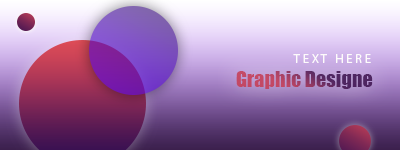
<style>
.page{position:relative;width:400px;height:150px}
.page>*{position:absolute;margin:0}
.t1{font:12.7px "MyriadPro-Regular";color:#fdfbfb}
.t2{font:20.3px "Impact"}
</style>
<div class="page">
<p class="t1" style="left:293px;top:54px;width:78px;height:9px">T E X T   H E R E</p>
<p class="t2" style="left:236px;top:71px;width:137px;height:18px">Graphic Designe</p>
</div>
